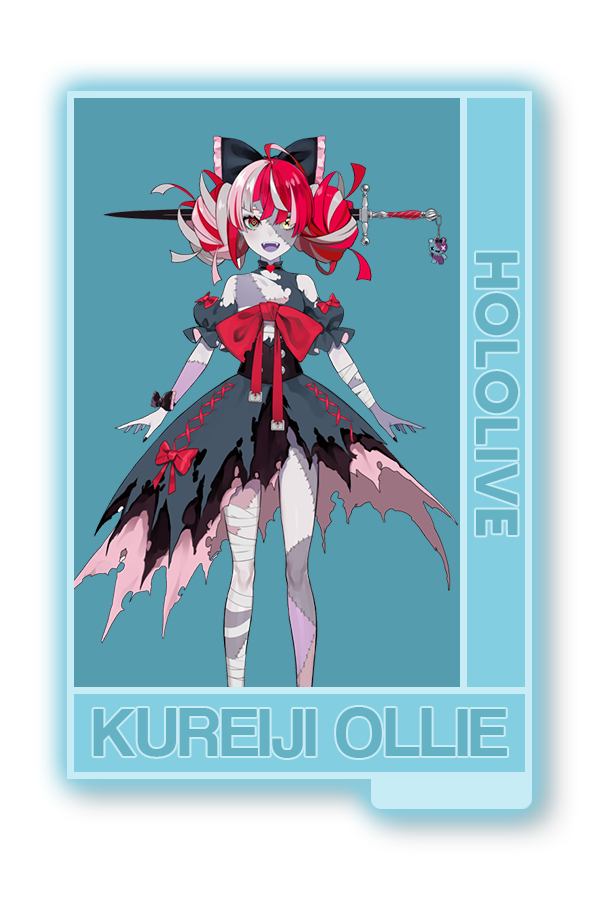
<style>
.page{position:relative;width:600px;height:900px;background:#549cae}
.page>*{position:absolute;margin:0}
.t1{font:59.2px "MADETOMMY-Bold";color:#66b2c5}
.t2{font:72.1px "CoolveticaRg-Regular";color:#66b2c5}
</style>
<div class="page">
<p class="t1" style="left:475px;top:252px;width:44px;height:284px;rotate:90deg">HOLOLIVE</p>
<p class="t2" style="left:93px;top:707px;width:414px;height:51px">KUREIJI OLLIE</p>
</div>
